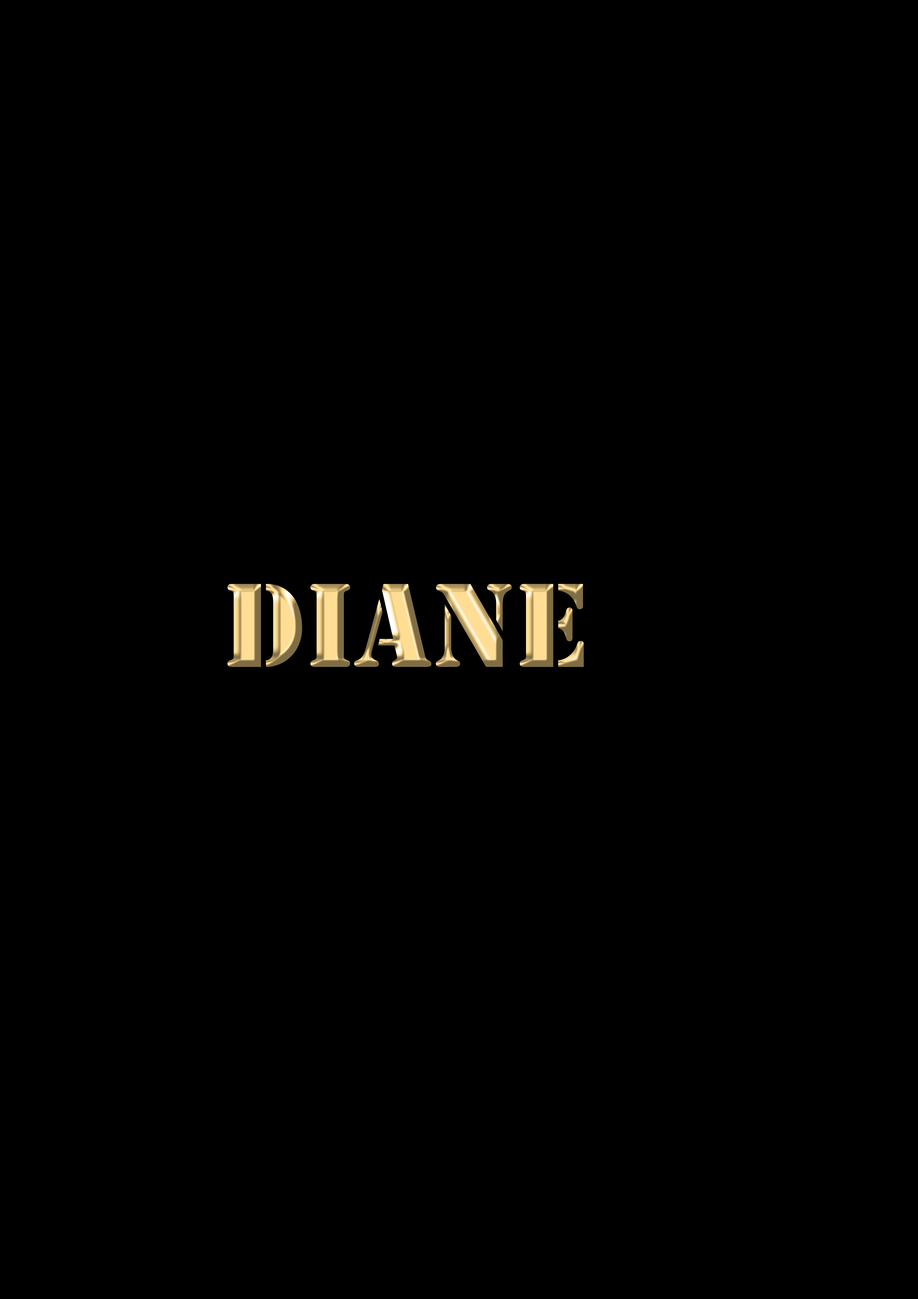
<style>
.page{position:relative;width:918px;height:1299px;background:#000000}
.page>*{position:absolute;margin:0}
.t1{font:111.1px "StencilStd"}
</style>
<div class="page">
<p class="t1" style="left:227px;top:583px;width:357px;height:84px">DIANE</p>
</div>
